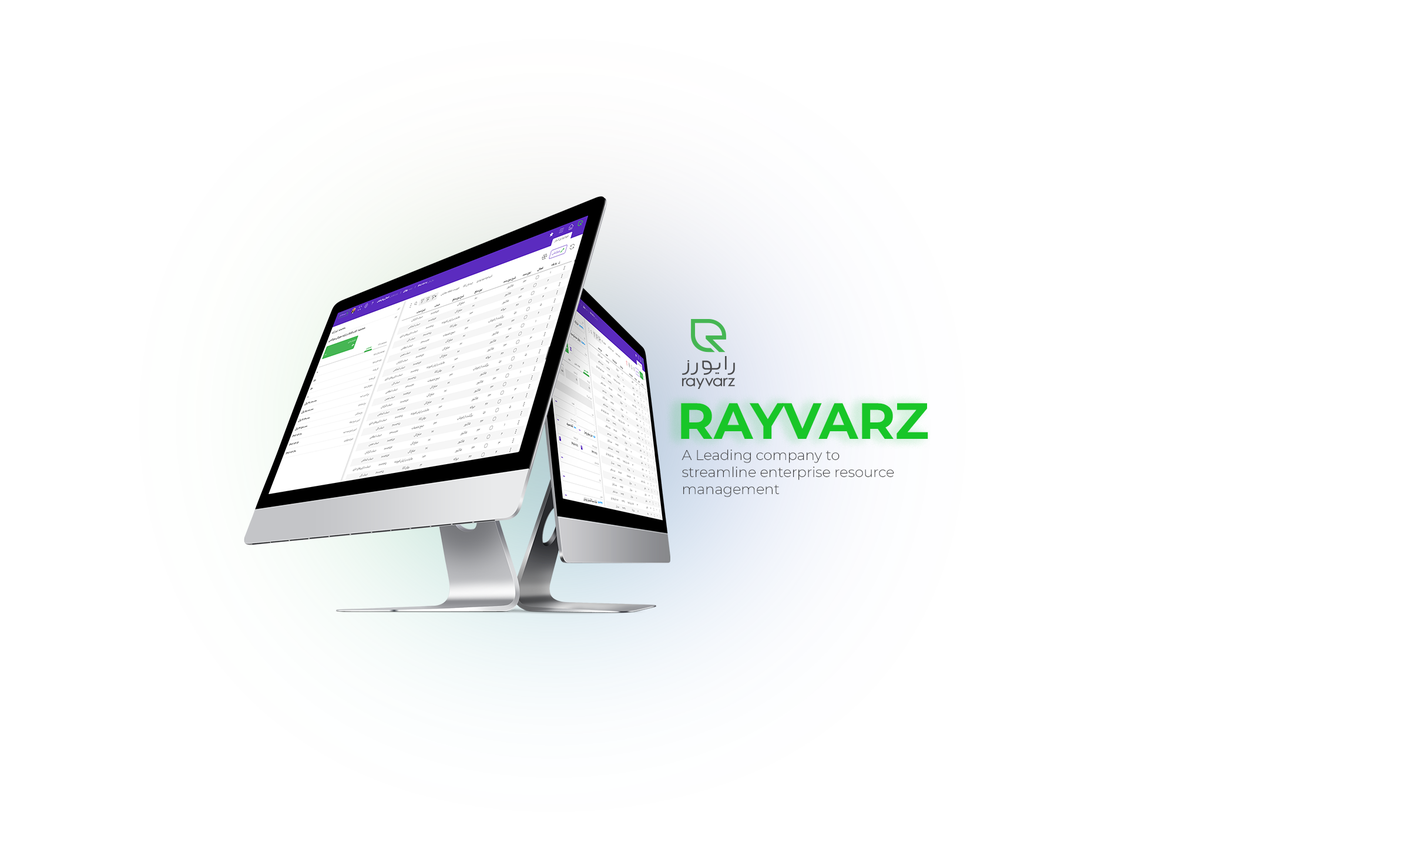
<style>
.page{position:relative;width:1410px;height:846px;background:#ffffff}
.page>*{position:absolute;margin:0}
.t1{font:50.9px "Montserrat-Bold";letter-spacing:-0.005em;color:#18c628}
.t2{font:14.2px "Montserrat-Light";letter-spacing:-0.005em;color:#3e3e3f}
</style>
<div class="page">
<p class="t1" style="left:681px;top:403px;width:247px;height:36px">RAYVARZ</p>
<p class="t2" style="left:681px;top:449px;width:213px;height:48px">A Leading company to streamline enterprise resource management</p>
</div>
